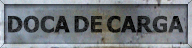
<style>
.page{position:relative;width:192px;height:48px}
.page>*{position:absolute;margin:0}
.t1{font:22.3px "Tahoma-Bold";color:#202121;text-transform:uppercase}
</style>
<div class="page">
<p class="t1" style="left:8px;top:15px;width:176px;height:18px">DOCA DE CARGA</p>
</div>
